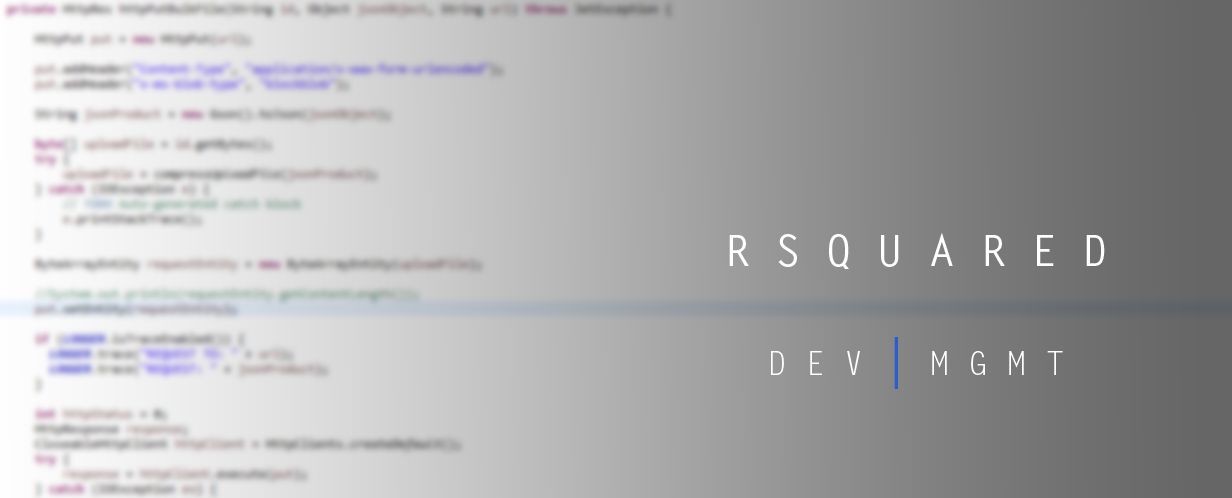
<style>
.page{position:relative;width:1232px;height:498px}
.page>*{position:absolute;margin:0}
.t1{font:42.7px "LetterGothicStd-Bold";color:#ffffff}
.t2{font:32px "LetterGothicStd";color:#ffffff}
.t3{font:48px "LetterGothicStd-Bold";color:#2a5dd0}
</style>
<div class="page">
<p class="t1" style="left:729px;top:232px;width:376px;height:157px;text-align:center">R S Q U A R E D<br><br><span class="t2">D E V </span><span class="t3">| </span><span class="t2">M G M T</span></p>
</div>
